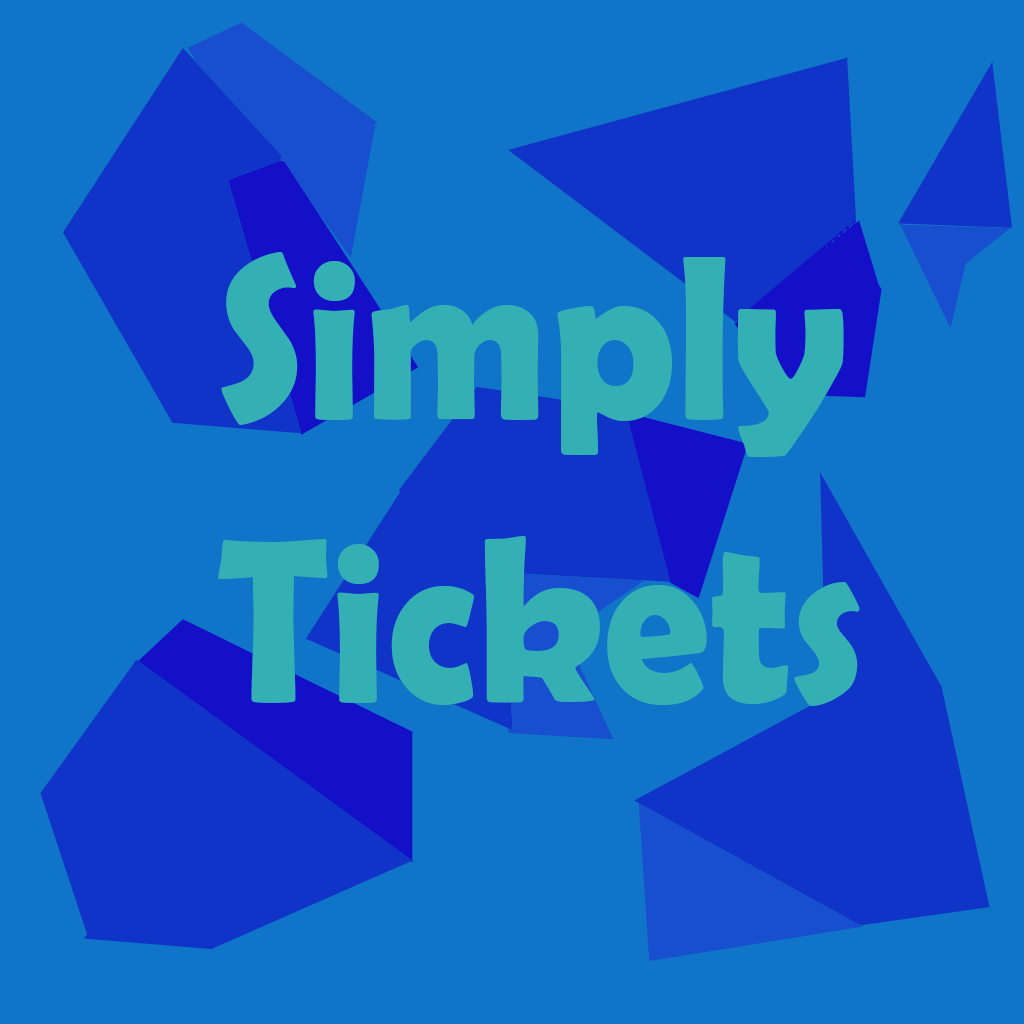
<style>
.page{position:relative;width:1024px;height:1024px;background:#1074c8}
.page>*{position:absolute;margin:0}
.t1{font:235.8px "BerlinSansFBDemi-Bold";color:#34b0b5;scale:0.9 1}
</style>
<div class="page">
<p class="t1" style="left:218px;top:252px;width:642px;height:454px">Simply <br>Tickets</p>
</div>
